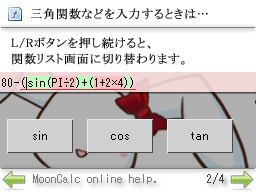
<style>
.page{position:relative;width:256px;height:192px;background:#ffffff}
.page>*{position:absolute;margin:0}
.t1{font:12px "MS-PMincho";letter-spacing:0.05em;color:#000000;font-weight:bold}
.t2{font:12px/16px "MS-PMincho";letter-spacing:0.05em;color:#000000;font-weight:bold}
.t3{font:14px "Terminal";color:#7f7f7f}
.t4{font:14px "Terminal";color:#404040}
</style>
<div class="page">
<p class="t1" style="left:31px;top:8px;width:177px;height:12px">三角関数などを入力するときは…</p>
<p class="t2" style="left:11px;top:37px;width:174px;height:28px">L/Rボタンを押し続けると、<br>関数リスト画面に切り替わります。</p>
<p class="t3" style="left:33px;top:174px;width:123px;height:10px">MoonCalc online help.</p>
<p class="t4" style="left:207px;top:173px;width:17px;height:11px">2/4</p>
</div>
